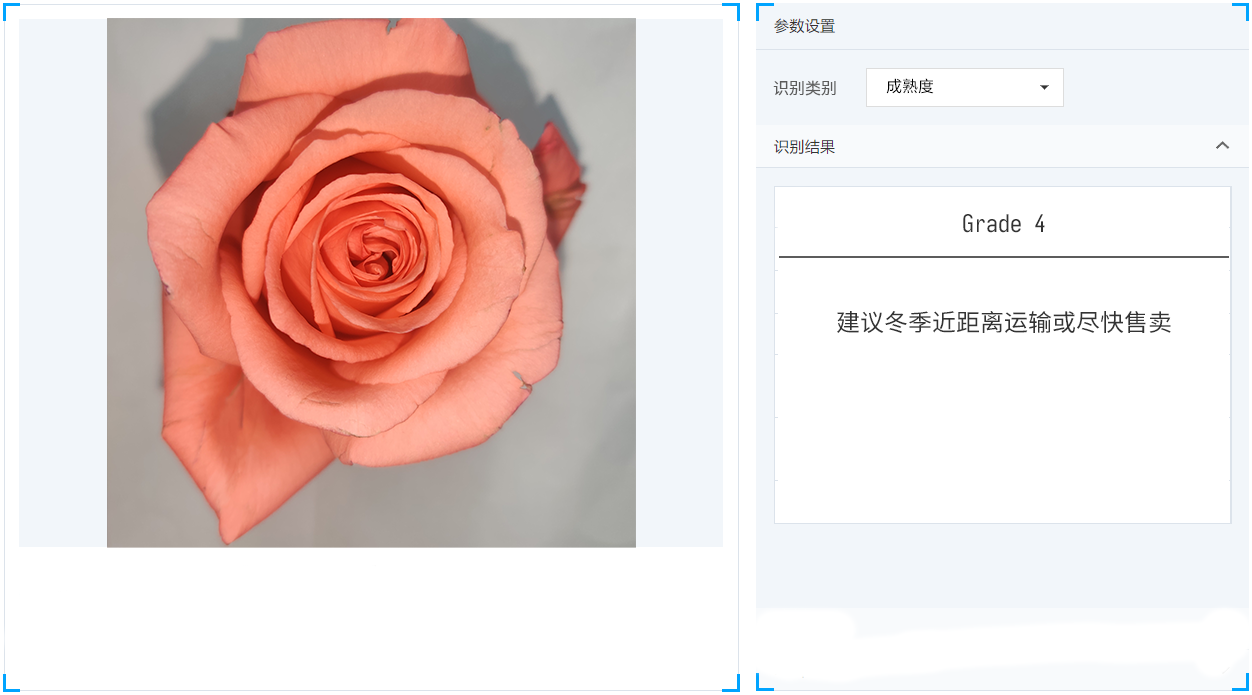
<style>
.page{position:relative;width:1252px;height:695px;background:#ffffff}
.page>*{position:absolute;margin:0}
.t1{font:16px "Sarasa-Mono-SC-Regular";color:#010101}
.t2{font:16px "Sarasa-Mono-SC-Regular";color:#5c5c5c}
.t3{font:24px "Sarasa-Mono-SC-Regular";color:#333333}
</style>
<div class="page">
<p class="t1" style="left:886px;top:78px;width:48px;height:16px">成熟度</p>
<p class="t2" style="left:773px;top:80px;width:63px;height:16px">识别类别</p>
<p class="t3" style="left:963px;top:214px;width:82px;height:19px">Grade 4</p>
<p class="t3" style="left:837px;top:311px;width:334px;height:22px">建议冬季近距离运输或尽快售卖</p>
</div>
